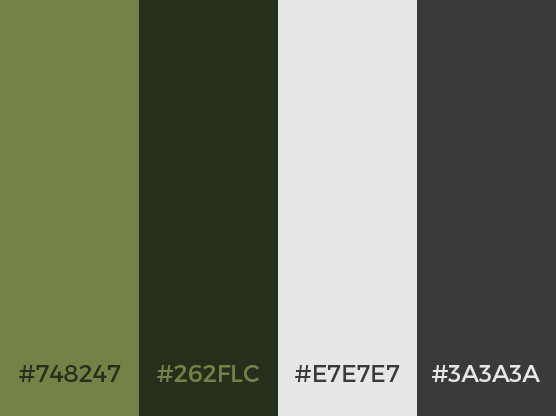
<style>
.page{position:relative;width:556px;height:416px;background:#748247}
.page>*{position:absolute;margin:0}
.t1{font:24px "Montserrat-Regular";color:#262f1c}
.t2{font:24px "Montserrat-Regular";color:#748247}
.t3{font:24px "Montserrat-Regular";color:#3a3a3a}
.t4{font:24px "Montserrat-Regular";color:#e7e7e7}
</style>
<div class="page">
<p class="t1" style="left:19px;top:365px;width:102px;height:17px">#748247</p>
<p class="t2" style="left:157px;top:365px;width:102px;height:17px">#262FLC</p>
<p class="t3" style="left:295px;top:365px;width:105px;height:17px">#E7E7E7</p>
<p class="t4" style="left:432px;top:365px;width:108px;height:17px">#3A3A3A</p>
</div>
